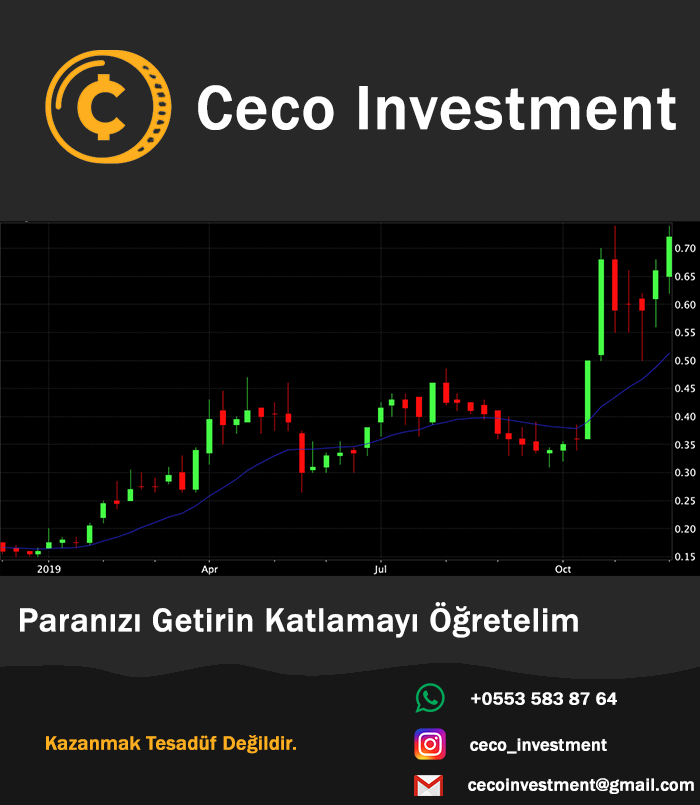
<style>
.page{position:relative;width:700px;height:805px;background:#282828}
.page>*{position:absolute;margin:0}
.t1{font:64px "FranklinGothic-Medium";color:#ffffff;font-weight:bold}
.t2{font:34px "FranklinGothic-Medium";color:#ffffff;font-weight:bold}
.t3{font:18px "FranklinGothic-Medium";color:#ffffff;font-weight:bold}
.t4{font:20px "FranklinGothic-Medium";color:#fdaf1f;font-weight:bold}
</style>
<div class="page">
<p class="t1" style="left:198px;top:85px;width:478px;height:45px">Ceco Investment</p>
<p class="t2" style="left:20px;top:602px;width:558px;height:36px">Paranızı Getirin Katlamayı Öğretelim</p>
<p class="t3" style="left:471px;top:692px;width:146px;height:13px">+0553 583 87 64</p>
<p class="t4" style="left:46px;top:735px;width:250px;height:19px">Kazanmak Tesadüf Değildir.</p>
<p class="t3" style="left:470px;top:738px;width:137px;height:16px">ceco_investment</p>
<p class="t3" style="left:468px;top:778px;width:226px;height:16px">cecoinvestment@gmail.com</p>
</div>
